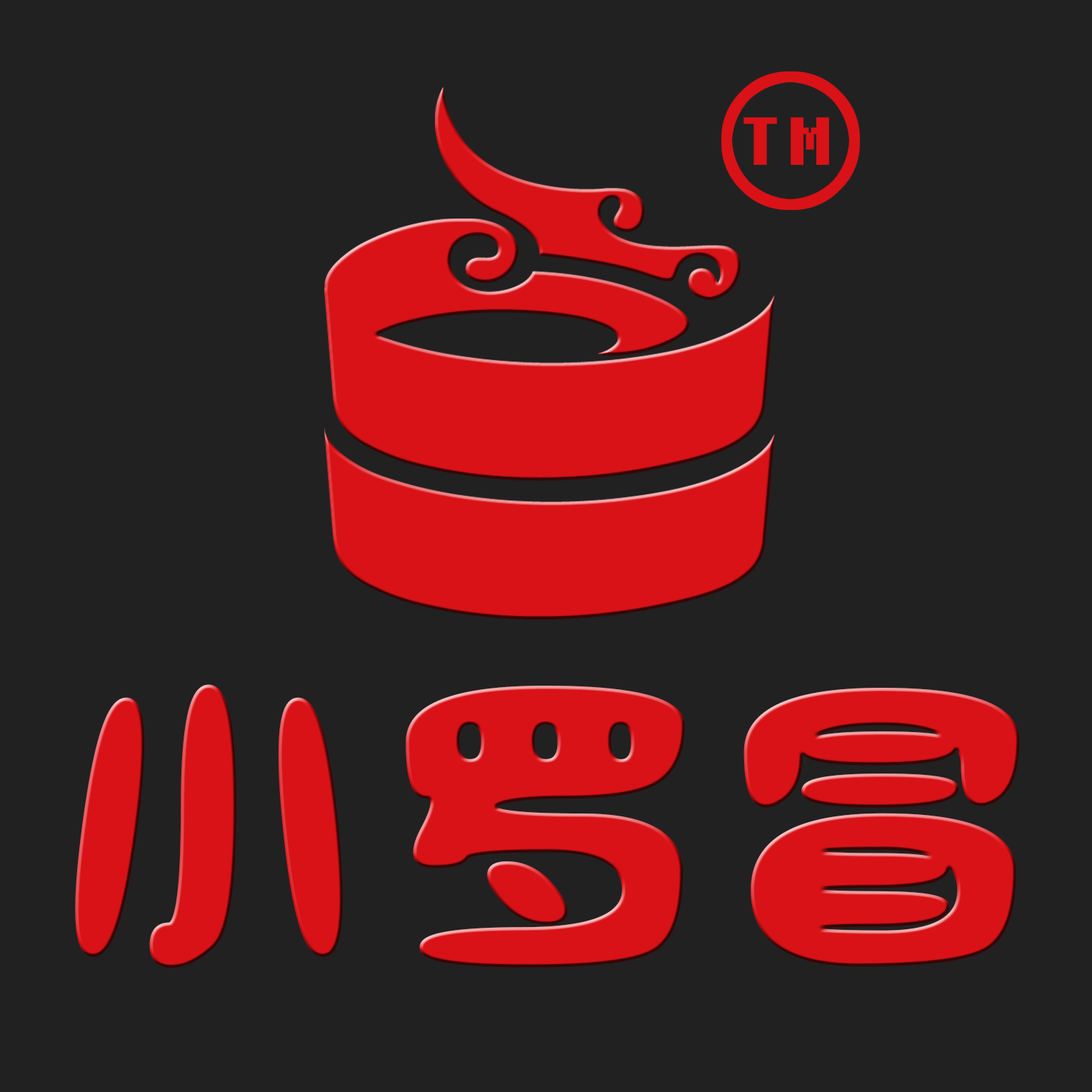
<style>
.page{position:relative;width:1092px;height:1092px;background:#212121}
.page>*{position:absolute;margin:0}
.t1{font:81.8px "Fixedsys";letter-spacing:0.075em;color:#d91217;text-transform:uppercase;font-weight:bold}
.t2{font:305px "SXSLST";letter-spacing:0.075em;color:#d91217;text-transform:uppercase;font-weight:bold}
</style>
<div class="page">
<p class="t1" style="left:743px;top:117px;width:86px;height:48px">TM</p>
<p class="t2" style="left:75px;top:684px;width:945px;height:284px">小罗冒</p>
</div>
